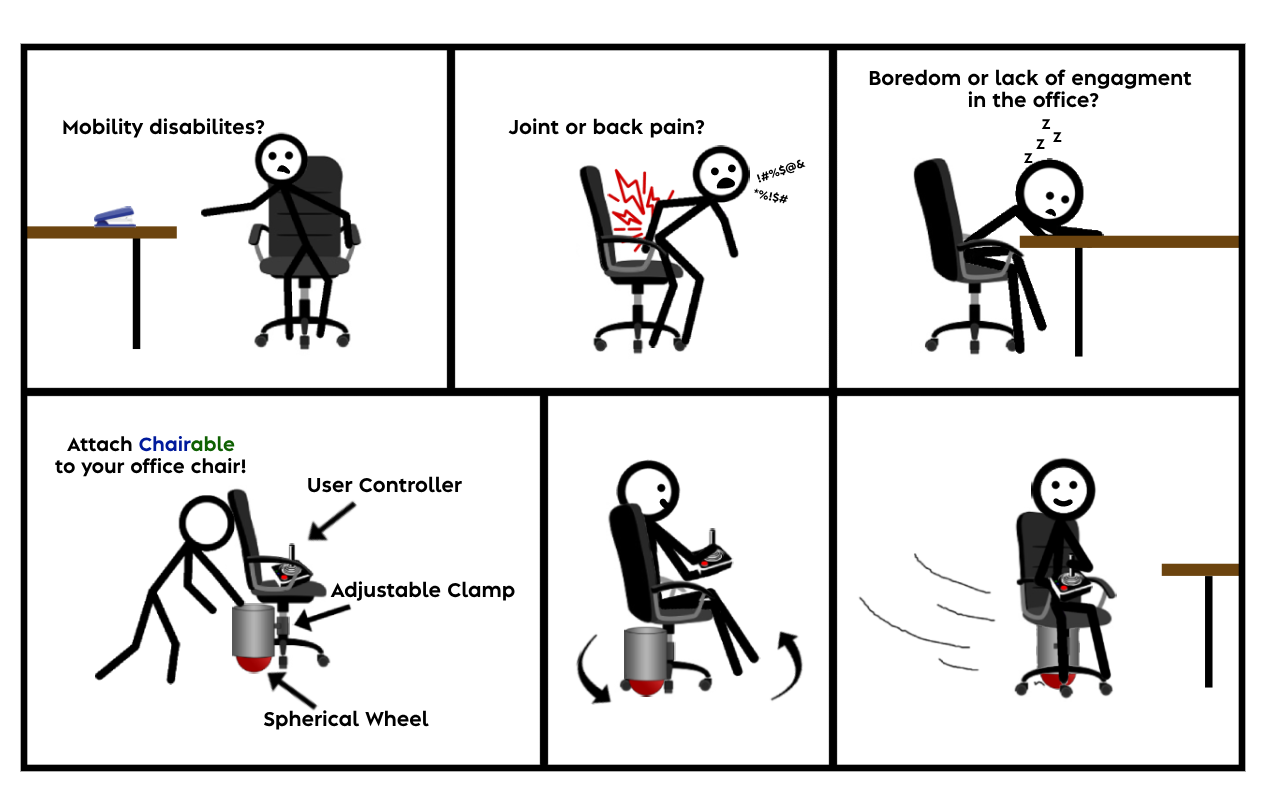
<style>
.page{position:relative;width:1280px;height:800px;background:#ffffff}
.page>*{position:absolute;margin:0}
.t1{font:18.7px "AlbulaPro-Bold";color:#000000}
.t2{font:13.1px "AlbulaPro-Bold";color:#000000}
.t3{font:11px "AlbulaPro-Bold";color:#000000}
.t4{font:18px "AlbulaPro-Bold";color:#000000}
.t5{font:18px "AlbulaPro-Bold";color:#001a9c}
.t6{font:18px "AlbulaPro-Bold";color:#0f6102}
</style>
<div class="page">
<p class="t1" style="left:869px;top:69px;width:323px;height:39px;text-align:center">Boredom or lack of engagment<br> in the office?</p>
<p class="t1" style="left:63px;top:118px;width:202px;height:20px">Mobility disabilites?</p>
<p class="t1" style="left:508px;top:118px;width:197px;height:20px">Joint or back pain?</p>
<p class="t2" style="left:1041px;top:119px;width:10px;height:10px">Z</p>
<p class="t2" style="left:1053px;top:132px;width:9px;height:10px">Z</p>
<p class="t2" style="left:1036px;top:139px;width:9px;height:10px">Z</p>
<p class="t3" style="left:756px;top:159px;width:50px;height:24px;rotate:-19deg">!#%$@&amp;</p>
<p class="t2" style="left:1024px;top:153px;width:9px;height:10px">Z</p>
<p class="t3" style="left:754px;top:188px;width:34px;height:16px;rotate:11deg">*%!$#</p>
<p class="t4" style="left:55px;top:435px;width:191px;height:42px;text-align:center">Attach <span class="t5">Chair</span><span class="t6">able<br></span>to your office chair!</p>
<p class="t1" style="left:308px;top:476px;width:154px;height:17px">User Controller</p>
<p class="t1" style="left:330px;top:581px;width:185px;height:20px">Adjustable Clamp</p>
<p class="t1" style="left:264px;top:710px;width:165px;height:20px">Spherical Wheel</p>
</div>
